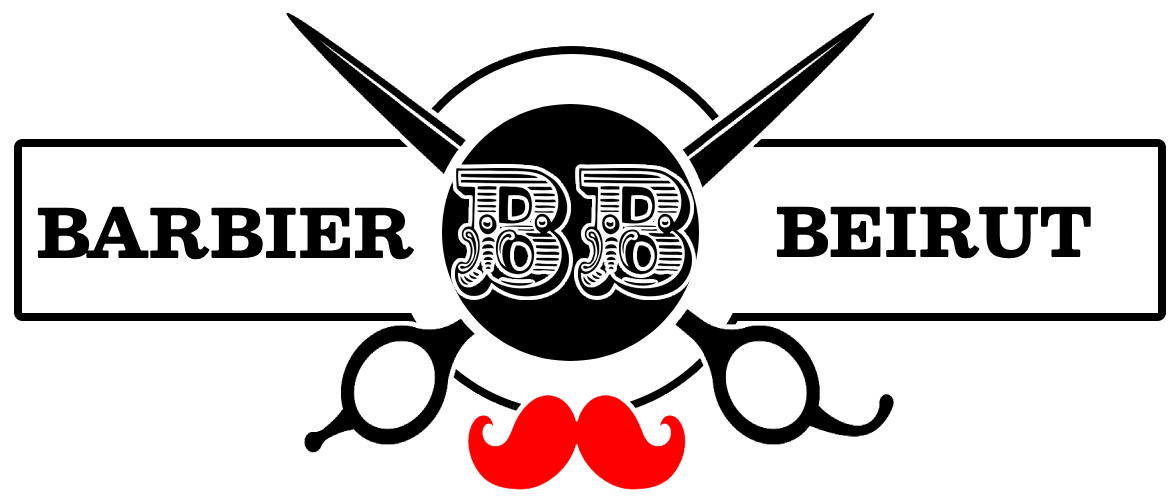
<style>
.page{position:relative;width:1175px;height:497px;background:#ffffff}
.page>*{position:absolute;margin:0}
.t1{font:67px "Besley-ExtraBold";color:#000000}
</style>
<div class="page">
<p class="t1" style="left:37px;top:206px;width:378px;height:54px">BARBIER</p>
<p class="t1" style="left:776px;top:206px;width:315px;height:53px">BEIRUT</p>
</div>
